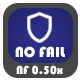
<style>
.page{position:relative;width:80px;height:80px;background:#464646}
.page>*{position:absolute;margin:0}
.t1{font:15px "Bauhaus93";color:#ffffff}
.t2{font:12px "Bauhaus93";color:#ffffff}
</style>
<div class="page">
<p class="t1" style="left:15px;top:46px;width:50px;height:12px">NO FAIL</p>
<p class="t2" style="left:16px;top:65px;width:47px;height:10px">NF 0.50x</p>
</div>
